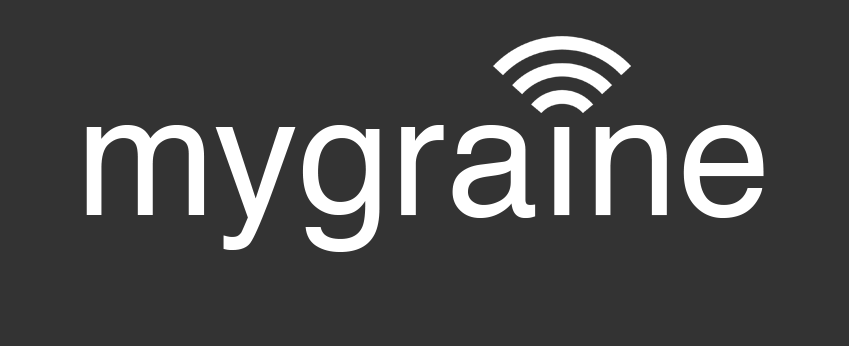
<style>
.page{position:relative;width:849px;height:346px;background:#333333}
.page>*{position:absolute;margin:0}
.t1{font:166.7px "Helvetica";color:#ffffff}
</style>
<div class="page">
<p class="t1" style="left:86px;top:125px;width:678px;height:127px">mygraıne</p>
</div>
